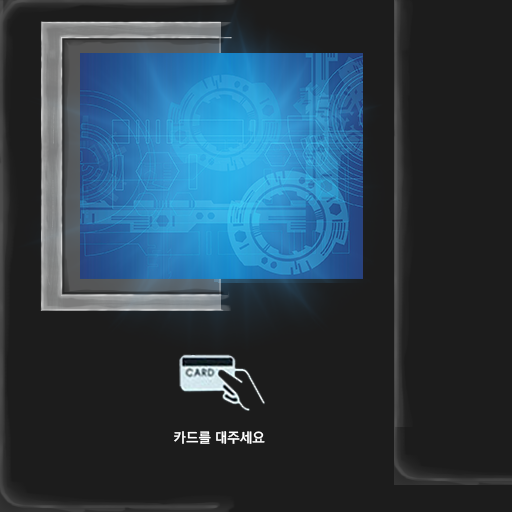
<style>
.page{position:relative;width:512px;height:512px;background:#1c1c1c}
.page>*{position:absolute;margin:0}
.t1{font:14px "RixMGoB";color:#ffffff}
</style>
<div class="page">
<p class="t1" style="left:174px;top:431px;width:91px;height:13px">카드를 대주세요</p>
</div>
